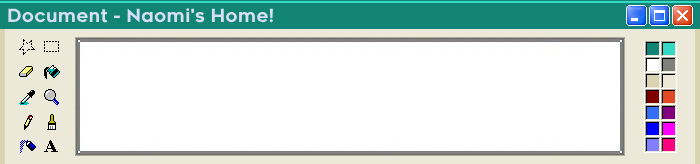
<style>
.page{position:relative;width:700px;height:164px;background:#ffffff}
.page>*{position:absolute;margin:0}
.t1{font:18px "Renogare-Regular";color:#d7def8}
</style>
<div class="page">
<p class="t1" style="left:8px;top:8px;width:265px;height:15px">Document - Naomi's Home!</p>
</div>
